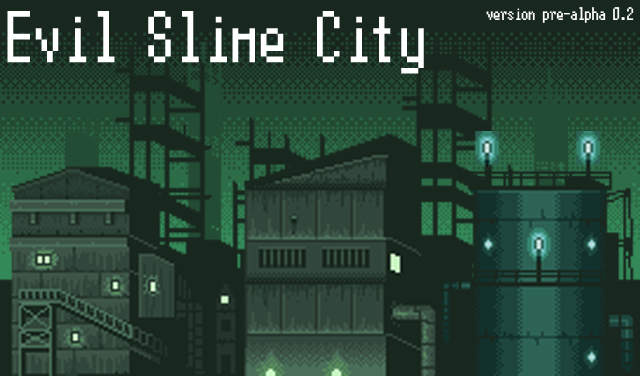
<style>
.page{position:relative;width:640px;height:376px;background:#19281f}
.page>*{position:absolute;margin:0}
.t1{font:72.7px "Terminal";color:#ffffff}
.t2{font:18.2px "Terminal";color:#ffffff}
</style>
<div class="page">
<p class="t1" style="left:7px;top:11px;width:417px;height:63px">Evil Slime City</p>
<p class="t2" style="left:486px;top:7px;width:148px;height:16px">version pre-alpha 0.2</p>
</div>
